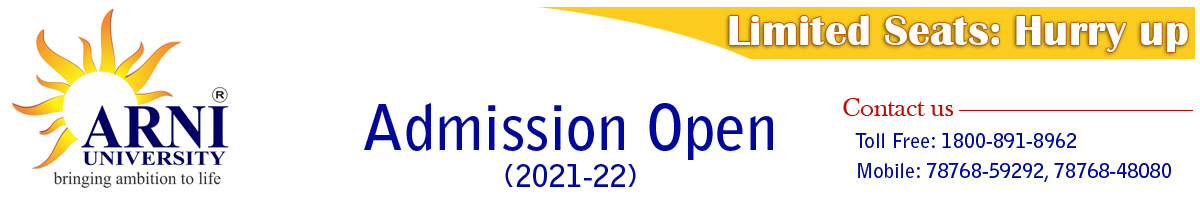
<style>
.page{position:relative;width:1200px;height:200px;background:#ffffff}
.page>*{position:absolute;margin:0}
.t1{font:44.1px "BritannicBold";color:#ffffff}
.t2{font:26.7px "BaskOldFace";color:#bf0d04}
.t3{font:62.2px "BellGothicStd-Bold";color:#00079d}
.t4{font:20px "BellGothicStd-Bold";color:#00079d}
.t5{font:30.3px "BellGothicStd-Bold";color:#00079d}
</style>
<div class="page">
<p class="t1" style="left:729px;top:15px;width:459px;height:37px">Limited Seats: Hurry up</p>
<p class="t2" style="left:843px;top:98px;width:111px;height:18px">Contact us</p>
<p class="t3" style="left:364px;top:103px;width:409px;height:57px">Admission Open</p>
<p class="t4" style="left:855px;top:133px;width:221px;height:15px">Toll Free: 1800-891-8962</p>
<p class="t5" style="left:505px;top:164px;width:131px;height:23px">(2021-22)</p>
<p class="t4" style="left:858px;top:163px;width:313px;height:19px">Mobile: 78768-59292, 78768-48080</p>
</div>
